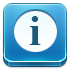
<style>
.page{position:relative;width:70px;height:70px}
.page>*{position:absolute;margin:0}
.t1{font:42px "TimesNewRomanPS-BoldMT";color:#1c5a7a}
</style>
<div class="page">
<p class="t1" style="left:29px;top:16px;width:12px;height:29px">i</p>
</div>
